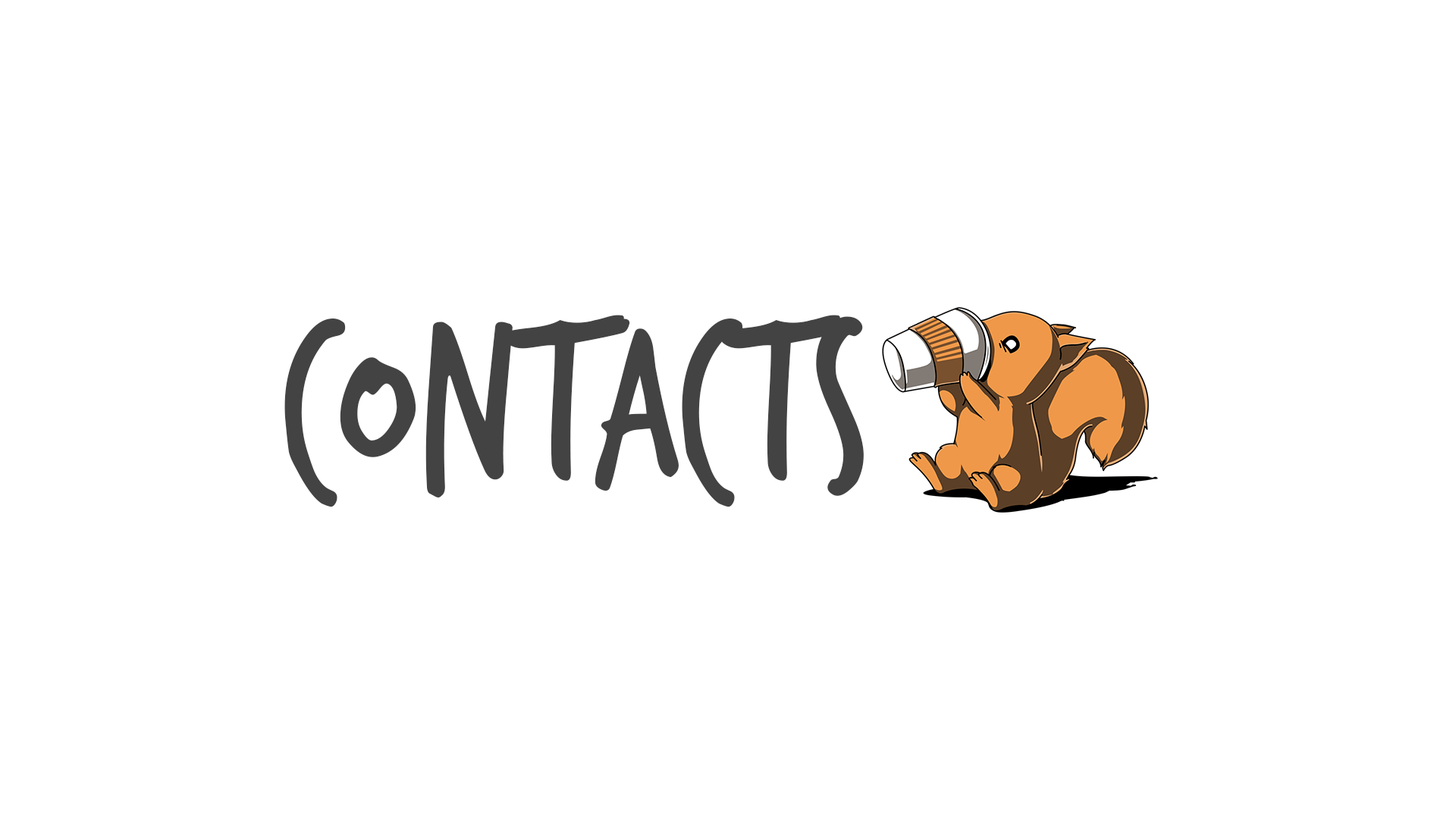
<style>
.page{position:relative;width:1456px;height:819px;background:#ffffff}
.page>*{position:absolute;margin:0}
.t1{font:236.1px "TrashHand";color:#434343;scale:0.89 1}
</style>
<div class="page">
<p class="t1" style="left:284px;top:315px;width:580px;height:192px">CONTACTS</p>
</div>
